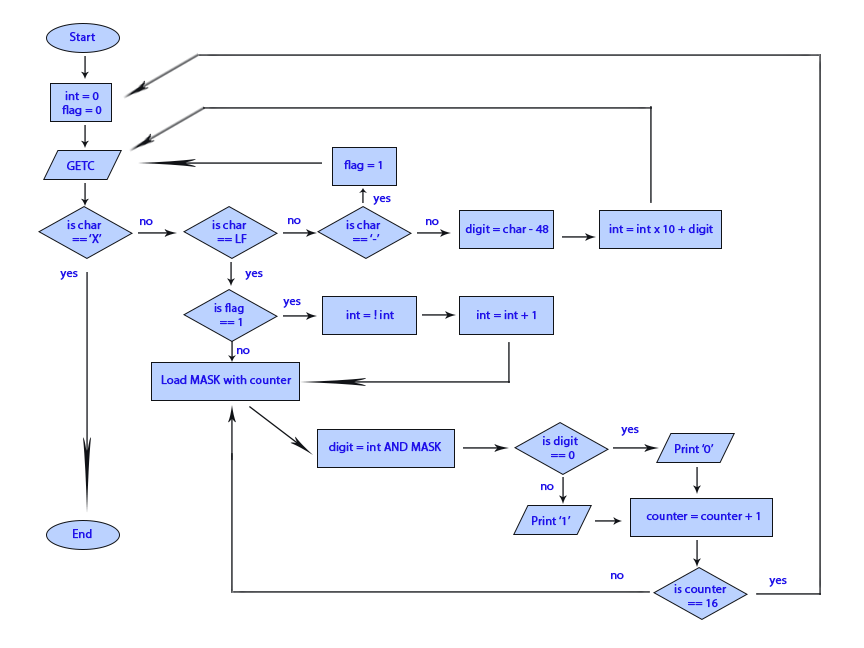
<style>
.page{position:relative;width:864px;height:648px;background:#ffffff}
.page>*{position:absolute;margin:0}
.t1{font:12px "MyriadPro-Regular";color:#2111ea;font-weight:bold}
</style>
<div class="page">
<p class="t1" style="left:69px;top:32px;width:27px;height:10px">Start</p>
<p class="t1" style="left:62px;top:91px;width:40px;height:26px;text-align:center">int = 0<br>flag = 0</p>
<p class="t1" style="left:67px;top:161px;width:28px;height:10px">GETC</p>
<p class="t1" style="left:344px;top:160px;width:38px;height:12px">flag = 1</p>
<p class="t1" style="left:373px;top:196px;width:18px;height:9px">yes</p>
<p class="t1" style="left:67px;top:220px;width:35px;height:24px;text-align:center">is char<br>== ‘X’</p>
<p class="t1" style="left:140px;top:219px;width:13px;height:7px">no</p>
<p class="t1" style="left:212px;top:220px;width:35px;height:24px;text-align:center">is char<br>== LF</p>
<p class="t1" style="left:288px;top:218px;width:13px;height:7px">no</p>
<p class="t1" style="left:346px;top:220px;width:35px;height:22px;text-align:center">is char<br>== ‘-’</p>
<p class="t1" style="left:426px;top:219px;width:13px;height:7px">no</p>
<p class="t1" style="left:465px;top:224px;width:84px;height:12px">digit = char - 48</p>
<p class="t1" style="left:609px;top:224px;width:104px;height:12px">int = int x 10 + digit</p>
<p class="t1" style="left:60px;top:271px;width:18px;height:9px">yes</p>
<p class="t1" style="left:245px;top:271px;width:18px;height:9px">yes</p>
<p class="t1" style="left:214px;top:303px;width:30px;height:24px;text-align:center">is flag<br>== 1</p>
<p class="t1" style="left:283px;top:299px;width:18px;height:9px">yes</p>
<p class="t1" style="left:346px;top:310px;width:48px;height:10px">int = ! int</p>
<p class="t1" style="left:477px;top:310px;width:59px;height:10px">int = int + 1</p>
<p class="t1" style="left:237px;top:348px;width:13px;height:7px">no</p>
<p class="t1" style="left:161px;top:375px;width:131px;height:10px">Load MASK with counter</p>
<p class="t1" style="left:543px;top:436px;width:35px;height:24px;text-align:center">is digit<br>== 0</p>
<p class="t1" style="left:621px;top:427px;width:18px;height:9px">yes</p>
<p class="t1" style="left:329px;top:442px;width:113px;height:12px">digit = int AND MASK</p>
<p class="t1" style="left:675px;top:444px;width:39px;height:10px">Print ‘0’</p>
<p class="t1" style="left:541px;top:484px;width:13px;height:7px">no</p>
<p class="t1" style="left:532px;top:516px;width:39px;height:10px">Print ‘1’</p>
<p class="t1" style="left:646px;top:512px;width:114px;height:9px">counter = counter + 1</p>
<p class="t1" style="left:73px;top:529px;width:19px;height:10px">End</p>
<p class="t1" style="left:611px;top:573px;width:13px;height:7px">no</p>
<p class="t1" style="left:769px;top:578px;width:18px;height:9px">yes</p>
<p class="t1" style="left:674px;top:584px;width:53px;height:24px;text-align:center">is counter<br>== 16</p>
</div>
